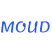
<style>
.page{position:relative;width:52px;height:52px;background:#ffffff}
.page>*{position:absolute;margin:0}
.t1{font:15px "Lemonada-Regular";color:#2559e9}
</style>
<div class="page">
<p class="t1" style="left:1px;top:21px;width:49px;height:12px">MOUD</p>
</div>
